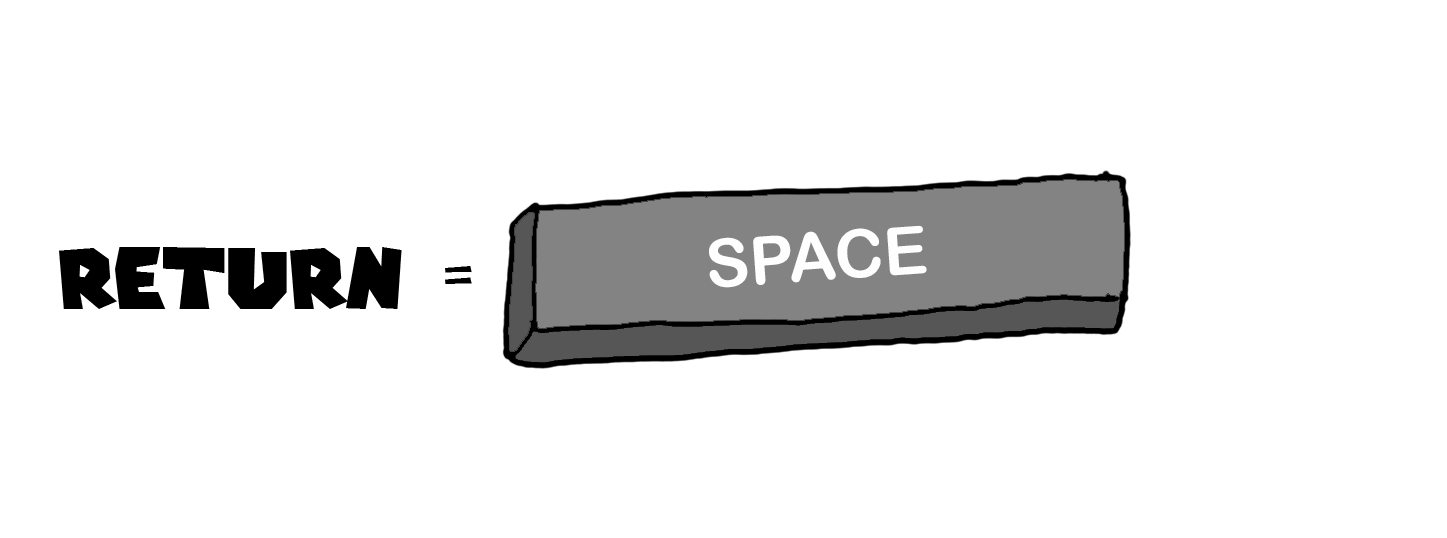
<style>
.page{position:relative;width:1447px;height:538px;background:#ffffff}
.page>*{position:absolute;margin:0}
.t1{font:83.4px "SuperMarioGalaxy";color:#000000}
</style>
<div class="page">
<p class="t1" style="left:59px;top:247px;width:413px;height:62px">return =</p>
</div>
